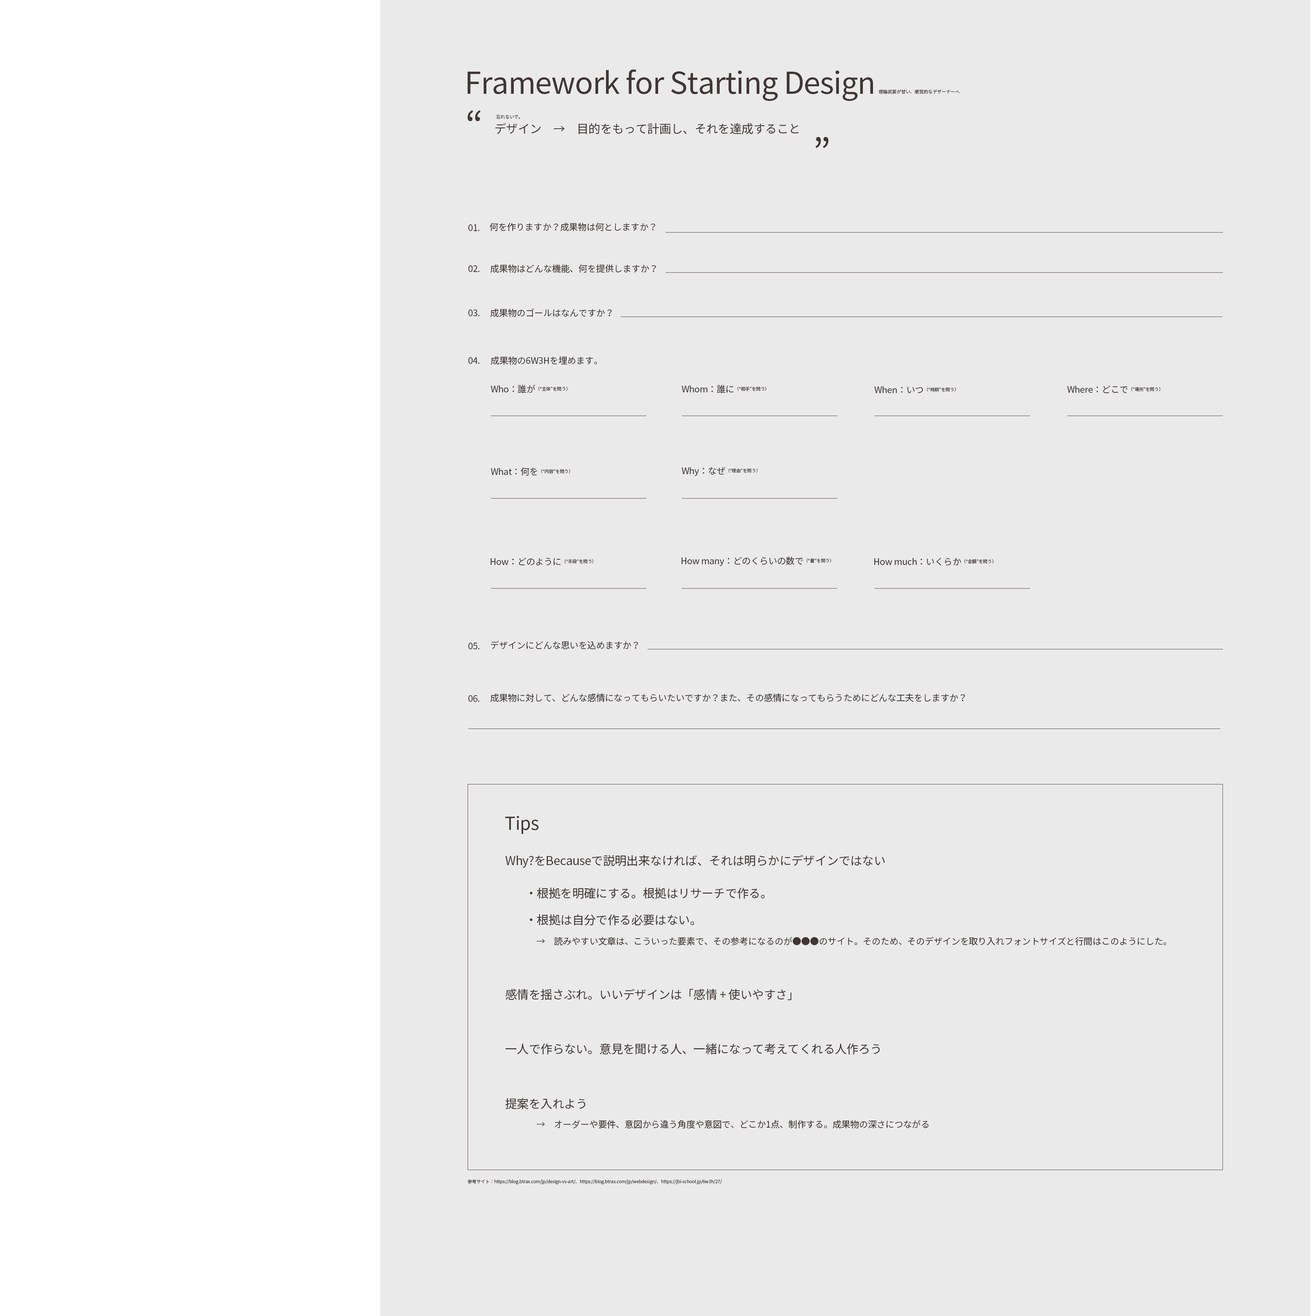
<style>
.page{position:relative;width:1314px;height:1316px;background:#eaeaea}
.page>*{position:absolute;margin:0}
.t1{font:30px "NotoSansJP-Regular";letter-spacing:-0.019em;color:#413535}
.t2{font:4.5px "NotoSansJP-Regular";color:#413535}
.t3{font:37.5px "NotoSansJP-Regular";letter-spacing:-0.019em;color:#413535}
.t4{font:12px "NotoSansJP-Regular";letter-spacing:-0.019em;color:#413535}
.t5{font:9px "NotoSansJP-Regular";letter-spacing:-0.019em;color:#413535}
.t6{font:4.5px "NotoSansJP-Regular";letter-spacing:-0.019em;color:#413535}
.t7{font:18px "NotoSansJP-Regular";letter-spacing:-0.019em;color:#413535}
</style>
<div class="page">
<p class="t1" style="left:468px;top:69px;width:405px;height:32px">Framework for Starting Design</p>
<p class="t2" style="left:879px;top:89px;width:81px;height:5px">理論武装が甘い、感覚的なデザーナーへ</p>
<p class="t3" style="left:468px;top:110px;width:360px;height:38px">“                                           ”</p>
<p class="t4" style="left:495px;top:123px;width:304px;height:11px">デザイン　→　目的をもって計画し、それを達成すること</p>
<p class="t2" style="left:496px;top:114px;width:24px;height:5px">忘れないで。</p>
<p class="t5" style="left:468px;top:224px;width:12px;height:7px">01.</p>
<p class="t5" style="left:490px;top:222px;width:165px;height:9px">何を作りますか？成果物は何としますか？</p>
<p class="t5" style="left:468px;top:265px;width:12px;height:7px">02.</p>
<p class="t5" style="left:490px;top:264px;width:166px;height:9px">成果物はどんな機能、何を提供しますか？</p>
<p class="t5" style="left:468px;top:309px;width:12px;height:7px">03.</p>
<p class="t5" style="left:490px;top:308px;width:122px;height:9px">成果物のゴールはなんですか？</p>
<p class="t5" style="left:468px;top:357px;width:12px;height:7px">04.</p>
<p class="t5" style="left:491px;top:356px;width:106px;height:9px">成果物の6W3Hを埋めます。</p>
<p class="t6" style="left:491px;top:384px;width:76px;height:9px"><span class="t5">Who：誰が</span>（“主体”を問う）</p>
<p class="t6" style="left:682px;top:384px;width:84px;height:9px"><span class="t5">Whom：誰に</span>（“相手”を問う）</p>
<p class="t6" style="left:874px;top:386px;width:82px;height:7px"><span class="t5">When：いつ</span>（“時期”を問う）</p>
<p class="t5" style="left:1067px;top:385px;width:93px;height:8px">Where：どこで<span class="t6">（“場所”を問う）</span></p>
<p class="t6" style="left:491px;top:467px;width:79px;height:9px"><span class="t5">What：何を</span>（“内容”を問う）</p>
<p class="t6" style="left:682px;top:467px;width:76px;height:9px"><span class="t5">Why：なぜ</span>（“理由”を問う）</p>
<p class="t5" style="left:490px;top:557px;width:104px;height:9px">How：どのように<span class="t6">（“手段”を問う）</span></p>
<p class="t5" style="left:681px;top:556px;width:150px;height:10px">How many：どのくらいの数で<span class="t6">（“量”を問う）</span></p>
<p class="t5" style="left:874px;top:558px;width:119px;height:8px">How much：いくらか<span class="t6">（“金額”を問う）</span></p>
<p class="t5" style="left:491px;top:640px;width:147px;height:9px">デザインにどんな思いを込めますか？</p>
<p class="t5" style="left:468px;top:642px;width:12px;height:7px">05.</p>
<p class="t5" style="left:468px;top:695px;width:12px;height:7px">06.</p>
<p class="t5" style="left:490px;top:693px;width:475px;height:9px">成果物に対して、どんな感情になってもらいたいですか？また、その感情になってもらうためにどんな工夫をしますか？</p>
<p class="t7" style="left:505px;top:816px;width:33px;height:18px">Tips</p>
<p class="t4" style="left:506px;top:854px;width:379px;height:13px">Why?をBecauseで説明出来なければ、それは明らかにデザインではない</p>
<p class="t4" style="left:530px;top:887px;width:235px;height:11px">・根拠を明確にする。根拠はリサーチで作る。</p>
<p class="t4" style="left:530px;top:914px;width:164px;height:11px">・根拠は自分で作る必要はない。</p>
<p class="t5" style="left:537px;top:936px;width:629px;height:9px">→　読みやすい文章は、こういった要素で、その参考になるのが●●●のサイト。そのため、そのデザインを取り入れフォントサイズと行間はこのようにした。</p>
<p class="t4" style="left:506px;top:988px;width:286px;height:12px">感情を揺さぶれ。いいデザインは「感情 + 使いやすさ」</p>
<p class="t4" style="left:506px;top:1043px;width:374px;height:11px">一人で作らない。意見を聞ける人、一緒になって考えてくれる人作ろう</p>
<p class="t4" style="left:505px;top:1098px;width:80px;height:11px">提案を入れよう</p>
<p class="t5" style="left:537px;top:1119px;width:391px;height:9px">→　オーダーや要件、意図から違う角度や意図で、どこか1点、制作する。成果物の深さにつながる</p>
<p class="t6" style="left:468px;top:1179px;width:254px;height:5px">参考サイト：https://blog.btrax.com/jp/design-vs-art/、https://blog.btrax.com/jp/webdesign/、https://jbi-school.jp/6w3h/27/</p>
</div>
